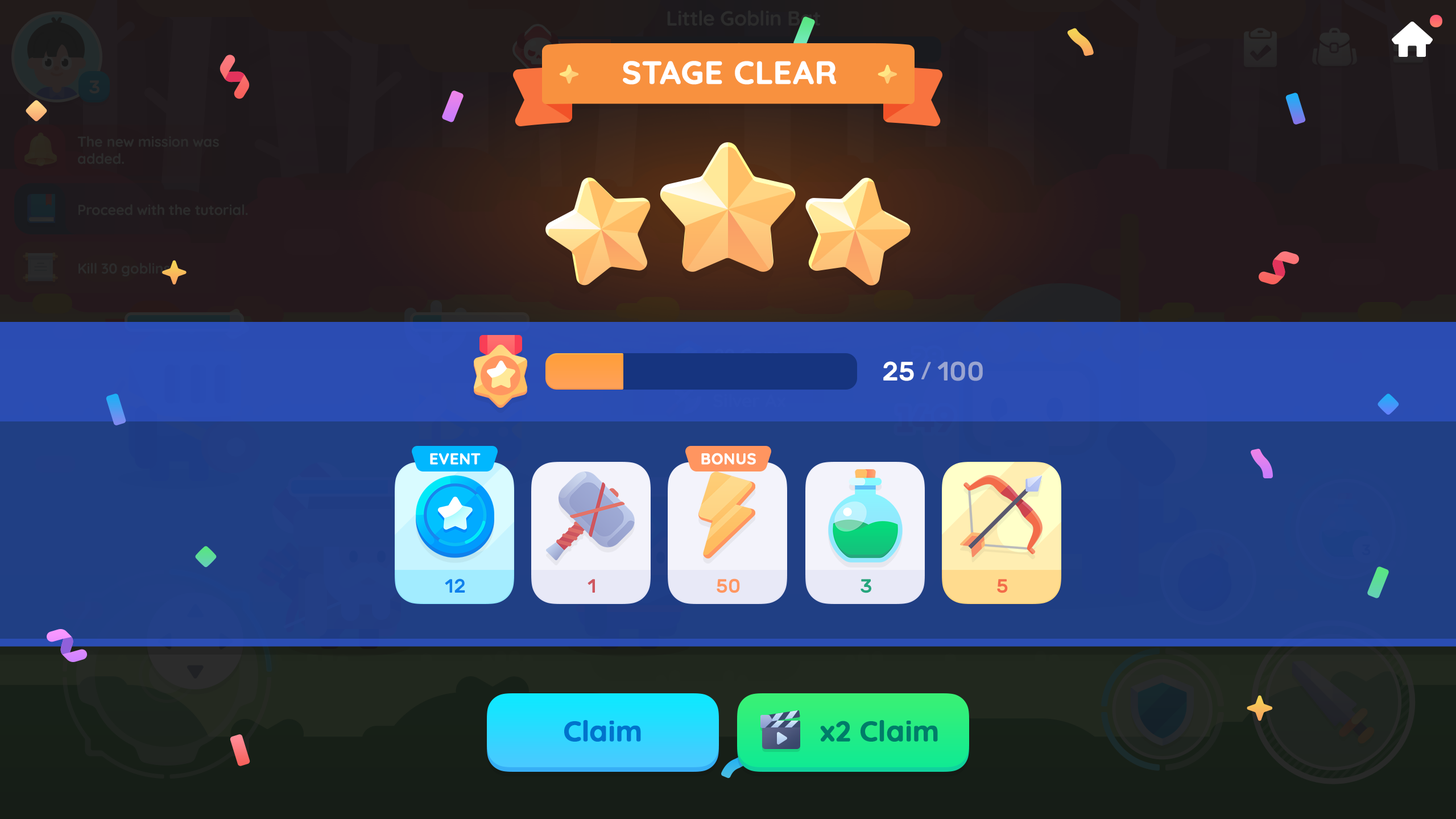
<style>
.page{position:relative;width:1456px;height:819px}
.page>*{position:absolute;margin:0}
.t1{font:31.8px "Quicksand-Bold";letter-spacing:0.01em;color:#ffffff;text-transform:uppercase;font-weight:bold}
.t2{font:26.6px "Rubik-Medium";color:#9aa5d1;text-transform:uppercase}
.t3{font:26.6px "Rubik-Medium";color:#ffffff;text-transform:uppercase}
.t4{font:19.9px "Rubik-Medium";color:#9aa5d1;text-transform:uppercase}
.t5{font:15.4px "Quicksand-Bold";color:#ffffff;text-transform:uppercase;font-weight:bold}
.t6{font:19.3px "Rubik-Medium";color:#0e81ec}
.t7{font:19.3px "Rubik-Medium";color:#ce5760}
.t8{font:19.3px "Rubik-Medium";color:#ff9761}
.t9{font:19.3px "Rubik-Medium";color:#26a67e}
.t10{font:19.3px "Rubik-Medium";color:#f36c4a}
.t11{font:28.4px "Quicksand-Bold";color:#0073cc;font-weight:bold}
.t12{font:28.4px "Quicksand-Bold";color:#007c69;font-weight:bold}
</style>
<div class="page">
<p class="t1" style="left:623px;top:61px;width:213px;height:24px">Stage Clear</p>
<p class="t2" style="left:883px;top:361px;width:100px;height:20px"><span class="t3">25 </span><span class="t4">/</span> 100</p>
<p class="t5" style="left:430px;top:453px;width:51px;height:12px">Event</p>
<p class="t5" style="left:701px;top:453px;width:55px;height:12px">Bonus</p>
<p class="t6" style="left:445px;top:578px;width:20px;height:15px">12</p>
<p class="t7" style="left:588px;top:579px;width:7px;height:14px">1</p>
<p class="t8" style="left:717px;top:578px;width:23px;height:15px">50</p>
<p class="t9" style="left:861px;top:579px;width:10px;height:14px">3</p>
<p class="t10" style="left:997px;top:579px;width:11px;height:14px">5</p>
<p class="t11" style="left:564px;top:720px;width:77px;height:22px">Claim</p>
<p class="t12" style="left:820px;top:720px;width:118px;height:22px">x2 Claim</p>
</div>
